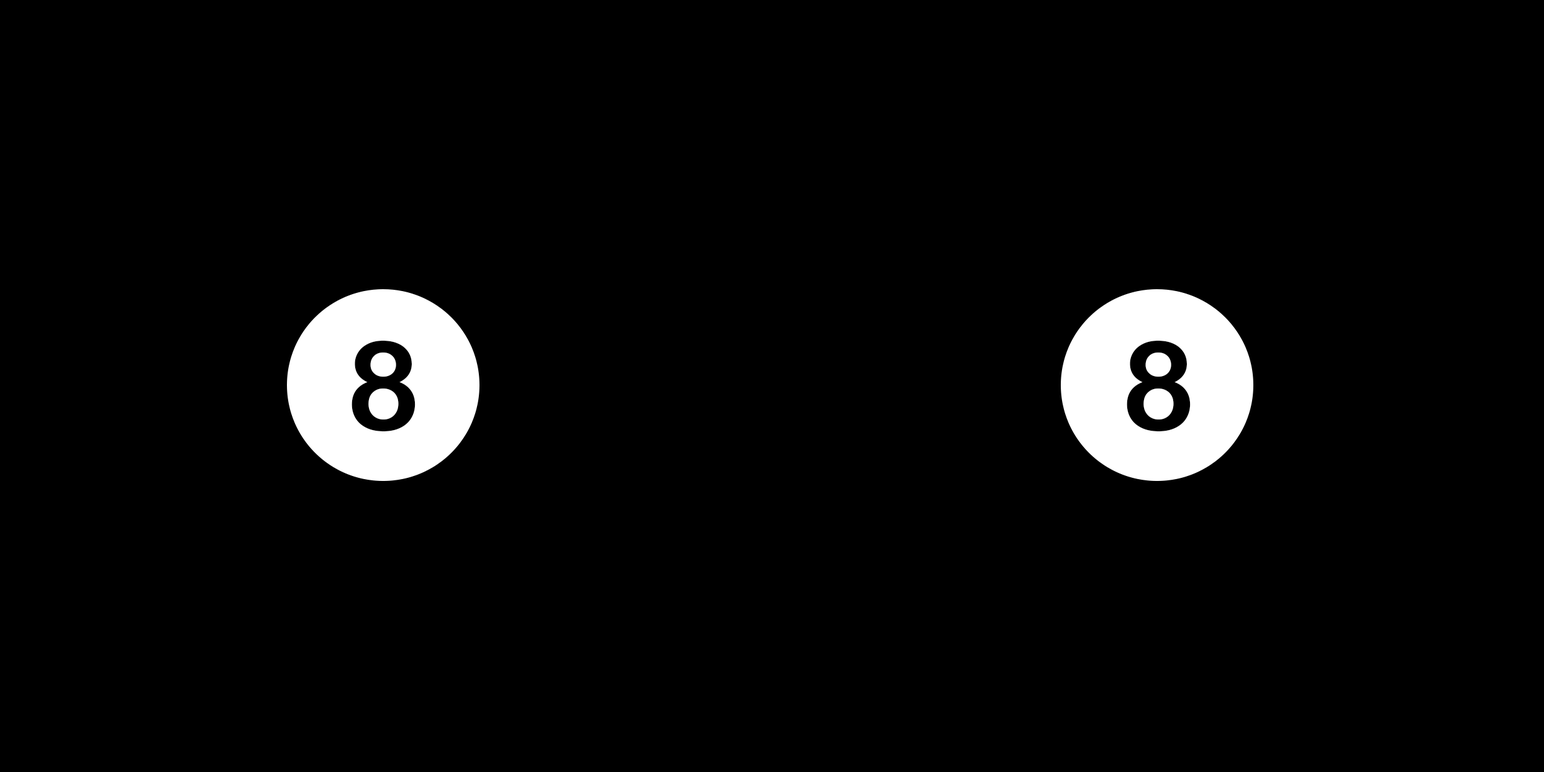
<style>
.page{position:relative;width:1544px;height:772px;background:#000000}
.page>*{position:absolute;margin:0}
.t1{font:124.2px "ArialRoundedMTBold";letter-spacing:-0.025em;color:#000000}
</style>
<div class="page">
<p class="t1" style="left:351px;top:341px;width:64px;height:91px">8</p>
<p class="t1" style="left:1126px;top:341px;width:64px;height:91px">8</p>
</div>
